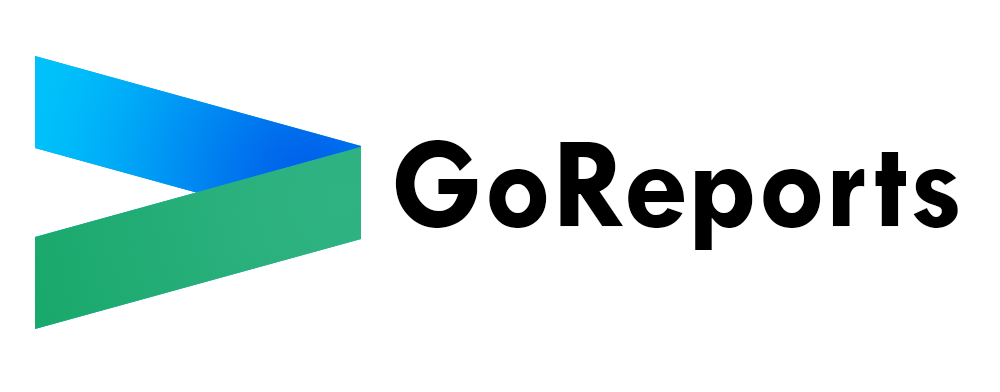
<style>
.page{position:relative;width:1000px;height:392px;background:#ffffff}
.page>*{position:absolute;margin:0}
.t1{font:131px "TwCenMT-Bold";color:#000000}
</style>
<div class="page">
<p class="t1" style="left:395px;top:140px;width:563px;height:110px">GoReports</p>
</div>
